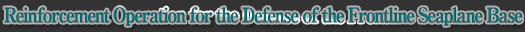
<style>
.page{position:relative;width:525px;height:32px;background:#333333}
.page>*{position:absolute;margin:0}
.t1{font:20px "RyuminPro-ExBold";letter-spacing:-0.08em;color:#006d72;scale:0.89 1}
</style>
<div class="page">
<p class="t1" style="left:4px;top:7px;width:519px;height:19px">Reinforcement Operation for the Defense of the Frontline Seaplane Base</p>
</div>
